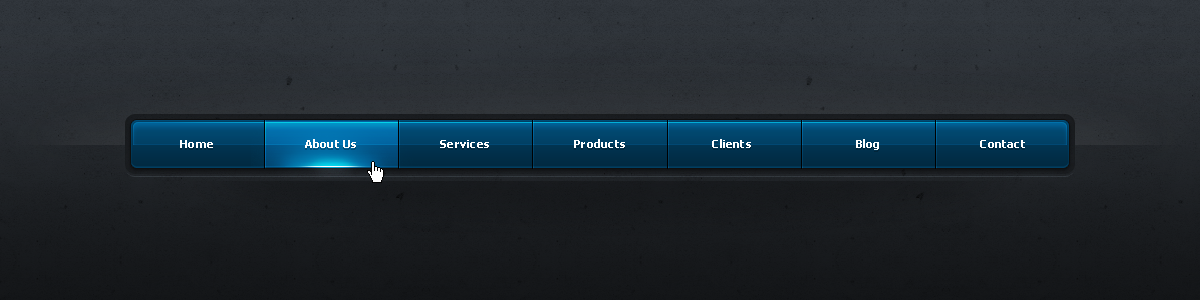
<style>
.page{position:relative;width:1200px;height:300px}
.page>*{position:absolute;margin:0}
.t1{font:11px "Tahoma-Bold";letter-spacing:0.02em;color:#ffffff}
</style>
<div class="page">
<p class="t1" style="left:180px;top:140px;width:33px;height:8px">Home</p>
<p class="t1" style="left:305px;top:139px;width:51px;height:9px">About Us</p>
<p class="t1" style="left:440px;top:140px;width:49px;height:8px">Services</p>
<p class="t1" style="left:574px;top:139px;width:51px;height:9px">Products</p>
<p class="t1" style="left:712px;top:139px;width:39px;height:9px">Clients</p>
<p class="t1" style="left:856px;top:139px;width:23px;height:11px">Blog</p>
<p class="t1" style="left:980px;top:140px;width:45px;height:8px">Contact</p>
</div>
